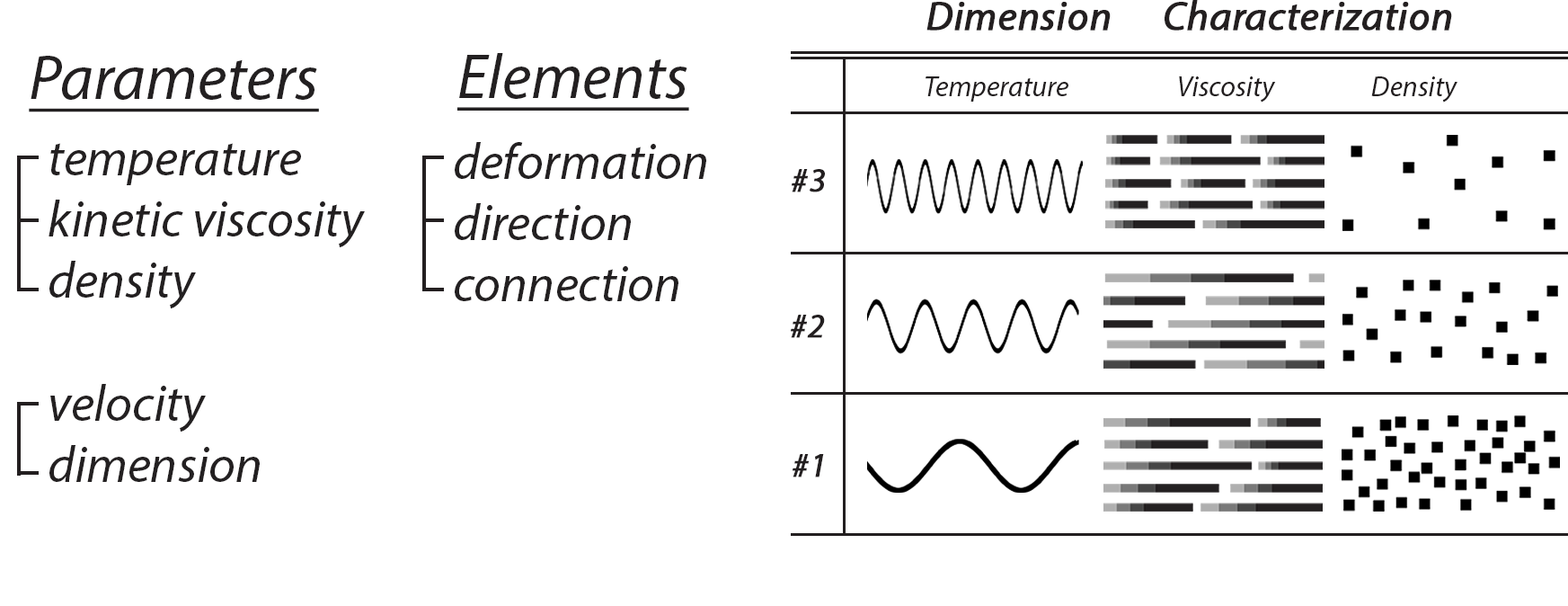
<style>
.page{position:relative;width:1568px;height:606px;background:#ffffff}
.page>*{position:absolute;margin:0}
.t1{font:40.7px "MyriadPro-It";color:#231f20;font-weight:bold}
.t2{font:63.8px "MyriadPro-It";color:#232021;text-decoration:underline}
.t3{font:28.5px "MyriadPro-It";color:#231f20}
.t4{font:51.1px "MyriadPro-It";color:#232021}
.t5{font:33.7px "MyriadPro-It";color:#231f20;font-weight:bold}
</style>
<div class="page">
<p class="t1" style="left:926px;top:0px;width:526px;height:31px">Dimension      Characterization</p>
<p class="t2" style="left:456px;top:53px;width:233px;height:58px">Elements</p>
<p class="t2" style="left:29px;top:56px;width:290px;height:56px">Parameters</p>
<p class="t3" style="left:926px;top:76px;width:142px;height:26px">Temperature</p>
<p class="t3" style="left:1179px;top:76px;width:97px;height:26px">Viscosity</p>
<p class="t3" style="left:1371px;top:76px;width:86px;height:26px">Density</p>
<p class="t4" style="left:49px;top:143px;width:316px;height:339px">temperature<br>kinetic viscosity<br>density<br><br>velocity<br>dimension</p>
<p class="t4" style="left:455px;top:142px;width:251px;height:159px">deformation<br>direction<br>connection</p>
<p class="t5" style="left:792px;top:169px;width:33px;height:23px">#3</p>
<p class="t5" style="left:791px;top:314px;width:34px;height:24px">#2</p>
<p class="t5" style="left:793px;top:454px;width:31px;height:23px">#1</p>
</div>
